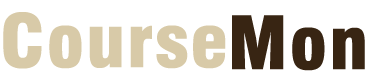
<style>
.page{position:relative;width:371px;height:79px;background:#ffffff}
.page>*{position:absolute;margin:0}
.t1{font:71px "Swiss721BT-BlackCondensed";color:#d8caa8;font-weight:bold;scale:1.06 1}
.t2{font:71px "Swiss721BT-BlackCondensed";color:#382513;font-weight:bold;scale:1.06 1}
</style>
<div class="page">
<p class="t1" style="left:3px;top:12px;width:223px;height:57px">Course</p>
<p class="t2" style="left:232px;top:15px;width:133px;height:56px">Mon</p>
</div>
